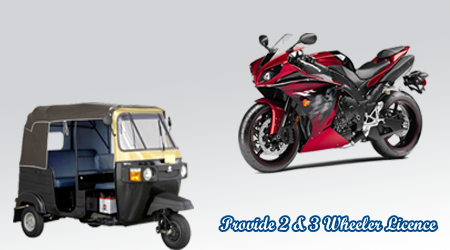
<style>
.page{position:relative;width:450px;height:250px;background:#d2d4d6}
.page>*{position:absolute;margin:0}
.t1{font:17.9px "ScriptMTBold";color:#ffffff}
</style>
<div class="page">
<p class="t1" style="left:220px;top:217px;width:217px;height:13px">Provide 2 &amp; 3 Wheeler Licence</p>
</div>
